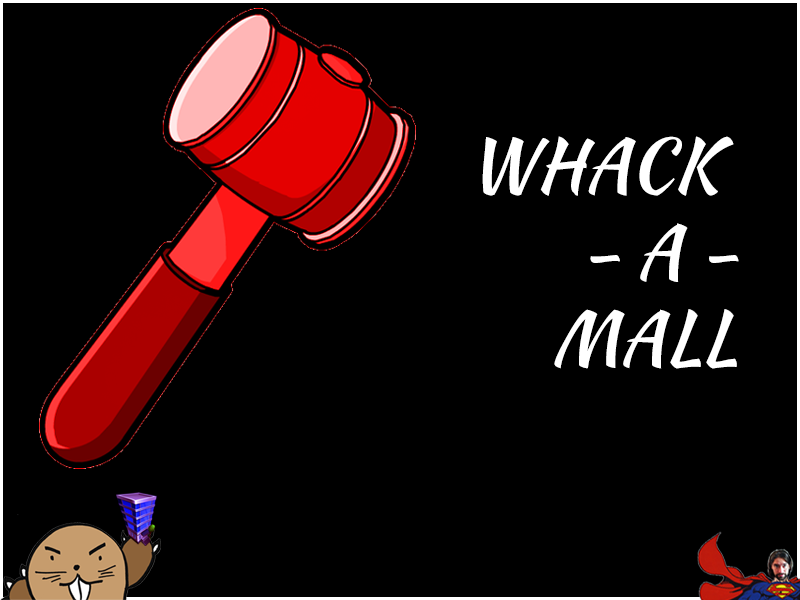
<style>
.page{position:relative;width:800px;height:600px;background:#000000}
.page>*{position:absolute;margin:0}
.t1{font:72px "KaushanScript-Regular";color:#ffffff}
</style>
<div class="page">
<p class="t1" style="left:482px;top:136px;width:257px;height:233px;text-align:right">WHACK <br>- A -<br>MALL</p>
</div>
